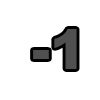
<style>
.page{position:relative;width:100px;height:100px;background:#ffffff}
.page>*{position:absolute;margin:0}
.t1{font:54.2px "Arial-Black";color:#505050}
</style>
<div class="page">
<p class="t1" style="left:33px;top:29px;width:44px;height:40px">-1</p>
</div>
